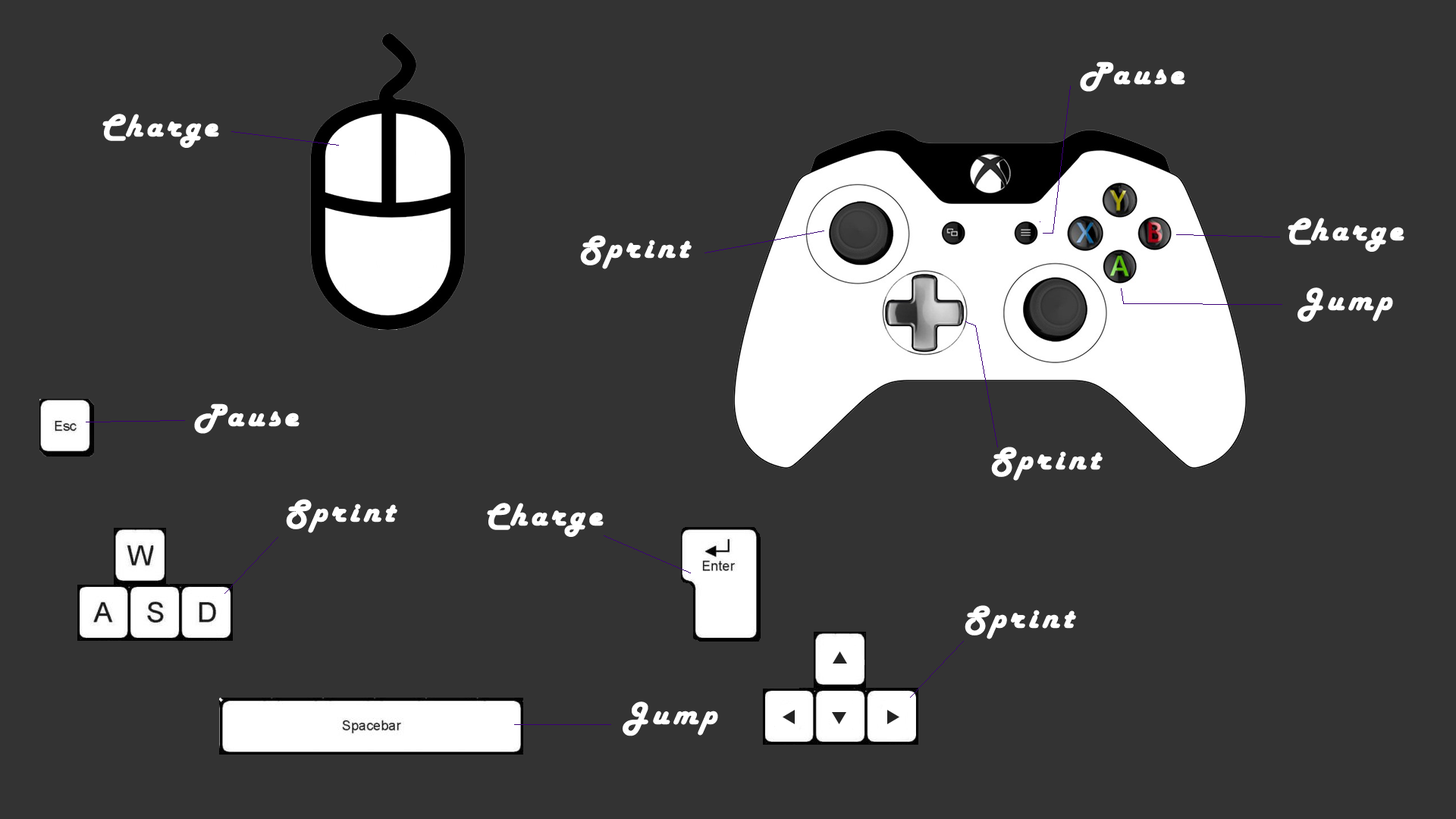
<style>
.page{position:relative;width:1456px;height:819px;background:#333333}
.page>*{position:absolute;margin:0}
.t1{font:31.8px "HarlowSolid";letter-spacing:0.1em;color:#ffffff;font-weight:bold;scale:1.07 1}
.t2{font:22.7px "HarlowSolid";letter-spacing:0.1em;color:#ffffff;scale:1.07 1}
</style>
<div class="page">
<p class="t1" style="left:1080px;top:61px;width:105px;height:31px"><span class="t2"><br><br></span>Pause</p>
<p class="t1" style="left:102px;top:114px;width:117px;height:34px"><span class="t2"><br><br></span>Charge</p>
<p class="t1" style="left:1288px;top:218px;width:116px;height:34px"><span class="t2"><br><br></span>Charge</p>
<p class="t1" style="left:580px;top:235px;width:112px;height:34px"><span class="t2"><br><br></span>Sprint</p>
<p class="t1" style="left:1297px;top:287px;width:96px;height:35px"><span class="t2"><br><br></span>Jump</p>
<p class="t1" style="left:194px;top:403px;width:106px;height:31px"><span class="t2"><br><br></span>Pause</p>
<p class="t1" style="left:991px;top:447px;width:112px;height:34px"><span class="t2"><br><br></span>Sprint</p>
<p class="t1" style="left:286px;top:499px;width:111px;height:34px"><span class="t2"><br><br></span>Sprint</p>
<p class="t1" style="left:487px;top:503px;width:117px;height:34px"><span class="t2"><br><br></span>Charge</p>
<p class="t1" style="left:965px;top:605px;width:111px;height:34px"><span class="t2"><br><br></span>Sprint</p>
<p class="t1" style="left:623px;top:701px;width:95px;height:35px"><span class="t2"><br><br></span>Jump</p>
</div>
